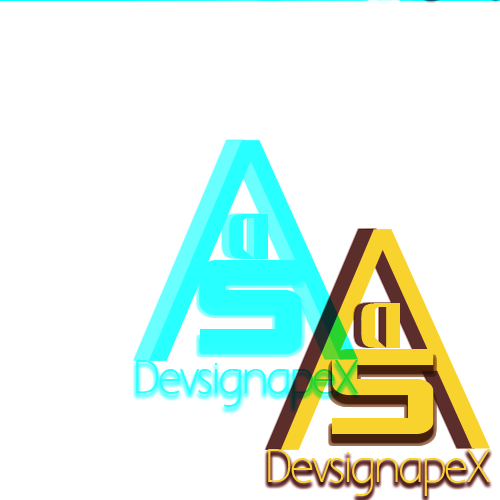
<style>
.page{position:relative;width:500px;height:500px;background:#ffffff}
.page>*{position:absolute;margin:0}
.t1{font:275.8px "AaarghNormal";letter-spacing:-0.07em;color:#28ffff;scale:1.22 1}
.t2{font:61.7px "Anklepants";letter-spacing:-0.07em;color:#28ffff}
.t3{font:120.5px "AlienEncountersSolid";letter-spacing:-0.07em;color:#28ffff;scale:1.4 1}
.t4{font:41.1px "AaarghNormal";letter-spacing:-0.07em}
</style>
<div class="page">
<p class="t1" style="left:148px;top:139px;width:210px;height:221px">A</p>
<p class="t2" style="left:229px;top:213px;width:39px;height:45px;rotate:180deg">D</p>
<p class="t3" style="left:200px;top:259px;width:102px;height:85px">s</p>
<p class="t4" style="left:136px;top:359px;width:222px;height:47px">DevsignapeX</p>
</div>
